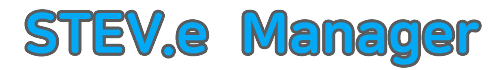
<style>
.page{position:relative;width:502px;height:70px;background:#ffffff}
.page>*{position:absolute;margin:0}
.t1{font:56px "NanumSquareRoundEB";color:#03a9f4}
</style>
<div class="page">
<p class="t1" style="left:27px;top:12px;width:180px;height:44px">STEV.e</p>
<p class="t1" style="left:244px;top:12px;width:235px;height:53px">Manager</p>
</div>
